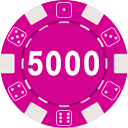
<style>
.page{position:relative;width:128px;height:128px;background:#d30390}
.page>*{position:absolute;margin:0}
.t1{font:36px "AcuminConcept-Bold";letter-spacing:0.05em;color:#ffffff;scale:0.8 1}
</style>
<div class="page">
<p class="t1" style="left:28px;top:50px;width:71px;height:26px">5000</p>
</div>
